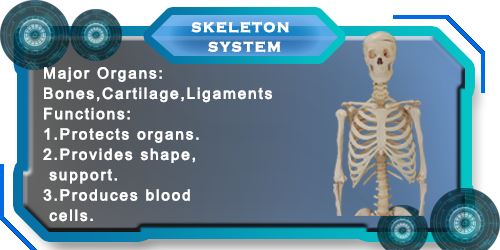
<style>
.page{position:relative;width:500px;height:250px}
.page>*{position:absolute;margin:0}
.t1{font:14px "CopperplateGothic-Bold";letter-spacing:0.1em;color:#ffffff;font-weight:bold}
.t2{font:15.2px/20.3px "ArialMT";letter-spacing:0.1em;color:#ffffff;font-weight:bold}
</style>
<div class="page">
<p class="t1" style="left:191px;top:21px;width:98px;height:12px">SKELETON</p>
<p class="t1" style="left:208px;top:41px;width:73px;height:12px">SYSTEM</p>
<p class="t2" style="left:43px;top:67px;width:229px;height:155px">Major Organs:<br>Bones,Cartilage,Ligaments<br>Functions: <br>1.Protects organs.<br>2.Provides shape,<br> support.<br>3.Produces blood<br> cells.</p>
</div>
